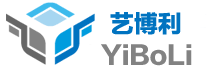
<style>
.page{position:relative;width:215px;height:68px;background:#ffffff}
.page>*{position:absolute;margin:0}
.t1{font:24px "FZLTTHK--GBK1-0";color:#0073c0}
.t2{font:24px "FZLTTHK--GBK1-0";color:#828282}
</style>
<div class="page">
<p class="t1" style="left:110px;top:12px;width:71px;height:23px">艺博利</p>
<p class="t2" style="left:101px;top:44px;width:91px;height:22px">YiBoLi</p>
</div>
